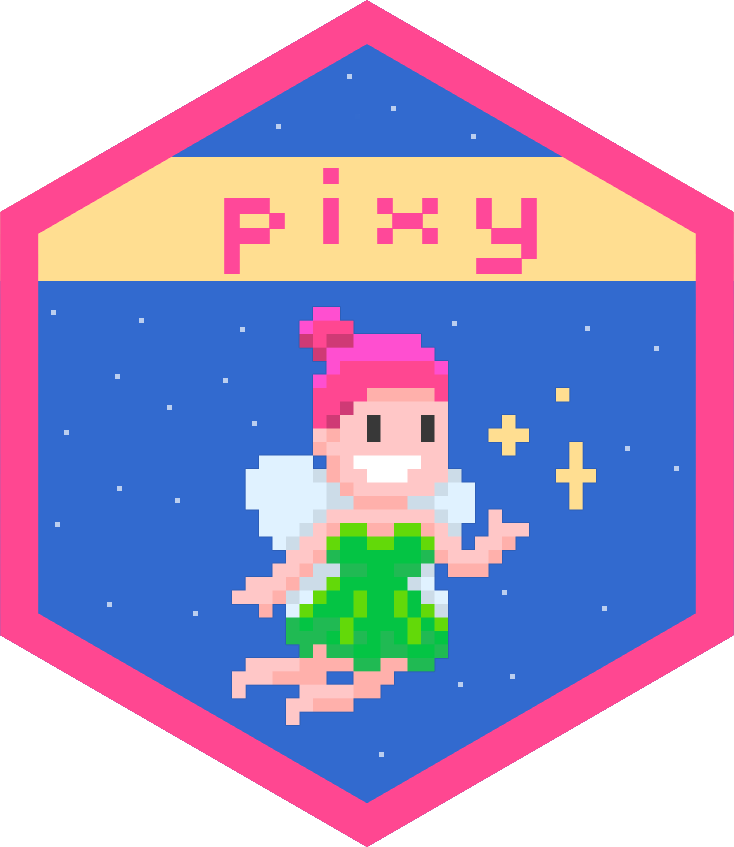
<style>
.page{position:relative;width:734px;height:847px;background:#326acf}
.page>*{position:absolute;margin:0}
.t1{font:100px "Pixel";letter-spacing:0.2em;color:#ff4899}
</style>
<div class="page">
<p class="t1" style="left:224px;top:168px;width:313px;height:106px">pixy</p>
</div>
